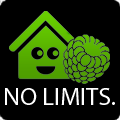
<style>
.page{position:relative;width:120px;height:120px;background:#000000}
.page>*{position:absolute;margin:0}
.t1{font:25px "MyriadPro-Regular";color:#ffffff}
</style>
<div class="page">
<p class="t1" style="left:5px;top:88px;width:110px;height:17px">NO LIMITS.</p>
</div>
